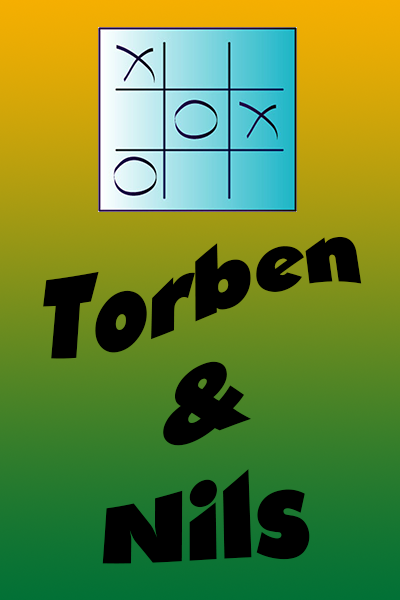
<style>
.page{position:relative;width:400px;height:600px}
.page>*{position:absolute;margin:0}
.t1{font:100px "OpineHeavy";color:#000000}
</style>
<div class="page">
<p class="t1" style="left:43px;top:236px;width:319px;height:328px;text-align:center">Torben <br>&amp;<br>Nils</p>
</div>
